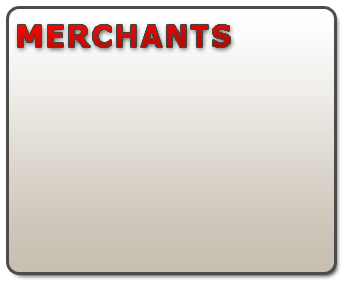
<style>
.page{position:relative;width:350px;height:287px}
.page>*{position:absolute;margin:0}
.t1{font:30px "Tahoma-Bold";letter-spacing:0.1em;color:#d00b06}
</style>
<div class="page">
<p class="t1" style="left:18px;top:25px;width:212px;height:22px">MERCHANTS</p>
</div>
